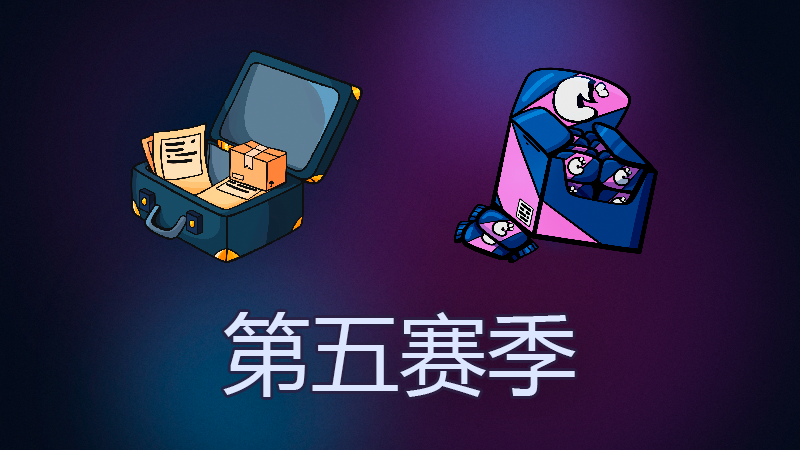
<style>
.page{position:relative;width:800px;height:450px}
.page>*{position:absolute;margin:0}
.t1{font:88.3px "MicrosoftYaHei";color:#dde6ff}
</style>
<div class="page">
<p class="t1" style="left:223px;top:312px;width:353px;height:85px">第五赛季</p>
</div>
